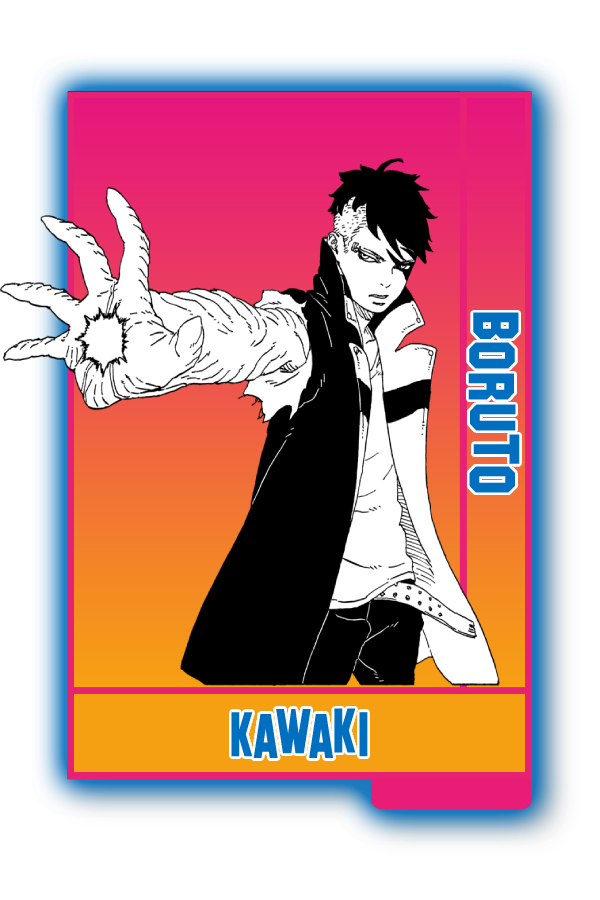
<style>
.page{position:relative;width:600px;height:900px;background:#ffffff}
.page>*{position:absolute;margin:0}
.t1{font:64.7px "SFHollywoodHills";color:#016fbf}
.t2{font:62.9px "SFHollywoodHills";color:#016fbf;scale:0.83 1}
</style>
<div class="page">
<p class="t1" style="left:468px;top:312px;width:52px;height:181px;rotate:90deg">Boruto</p>
<p class="t2" style="left:231px;top:708px;width:137px;height:51px">Kawaki</p>
</div>
